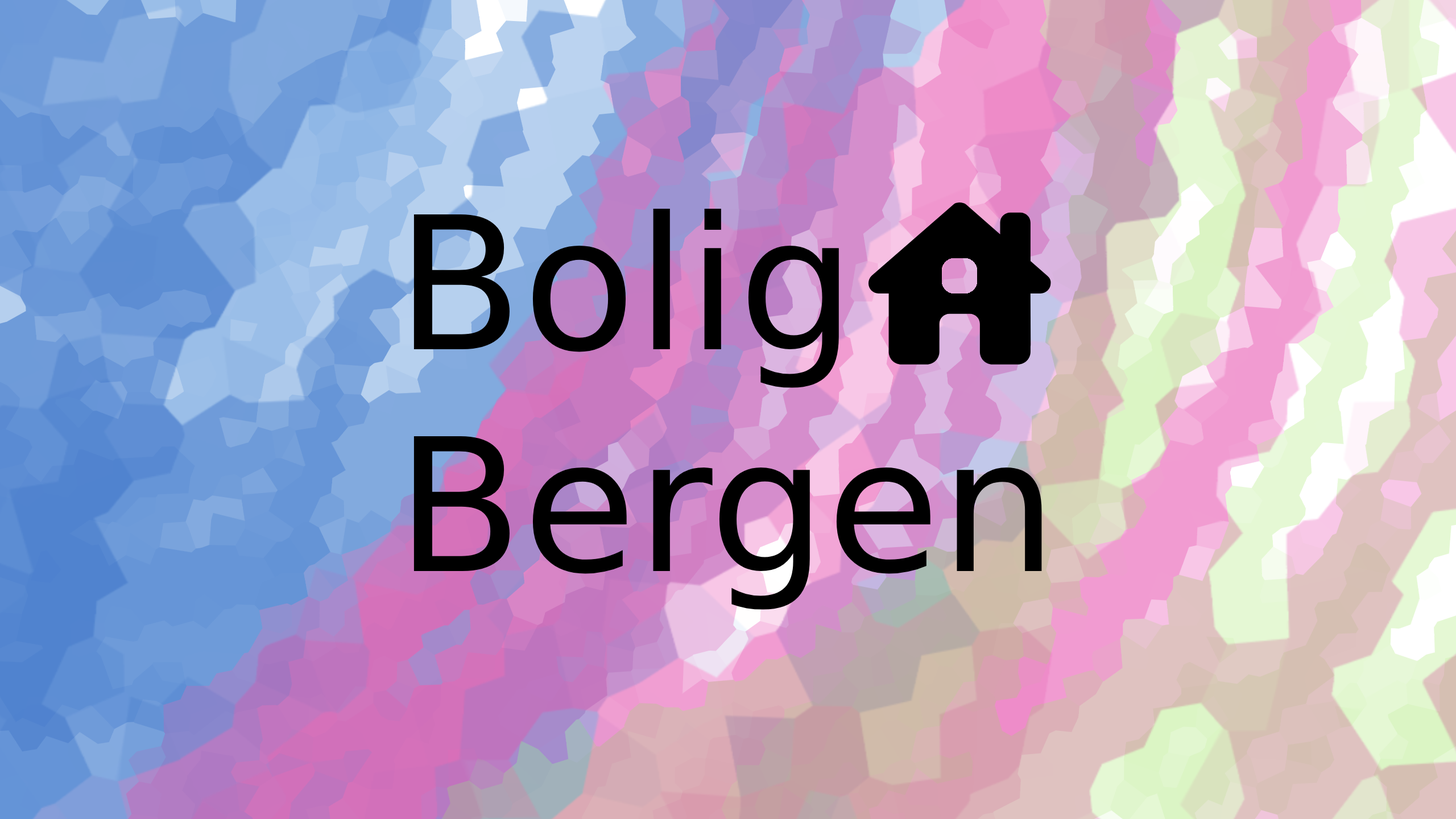
<style>
.page{position:relative;width:1456px;height:819px}
.page>*{position:absolute;margin:0}
.t1{font:184.8px "DejaVuSans";color:#000000}
</style>
<div class="page">
<p class="t1" style="left:413px;top:209px;width:629px;height:401px">Bolig  Bergen</p>
</div>
